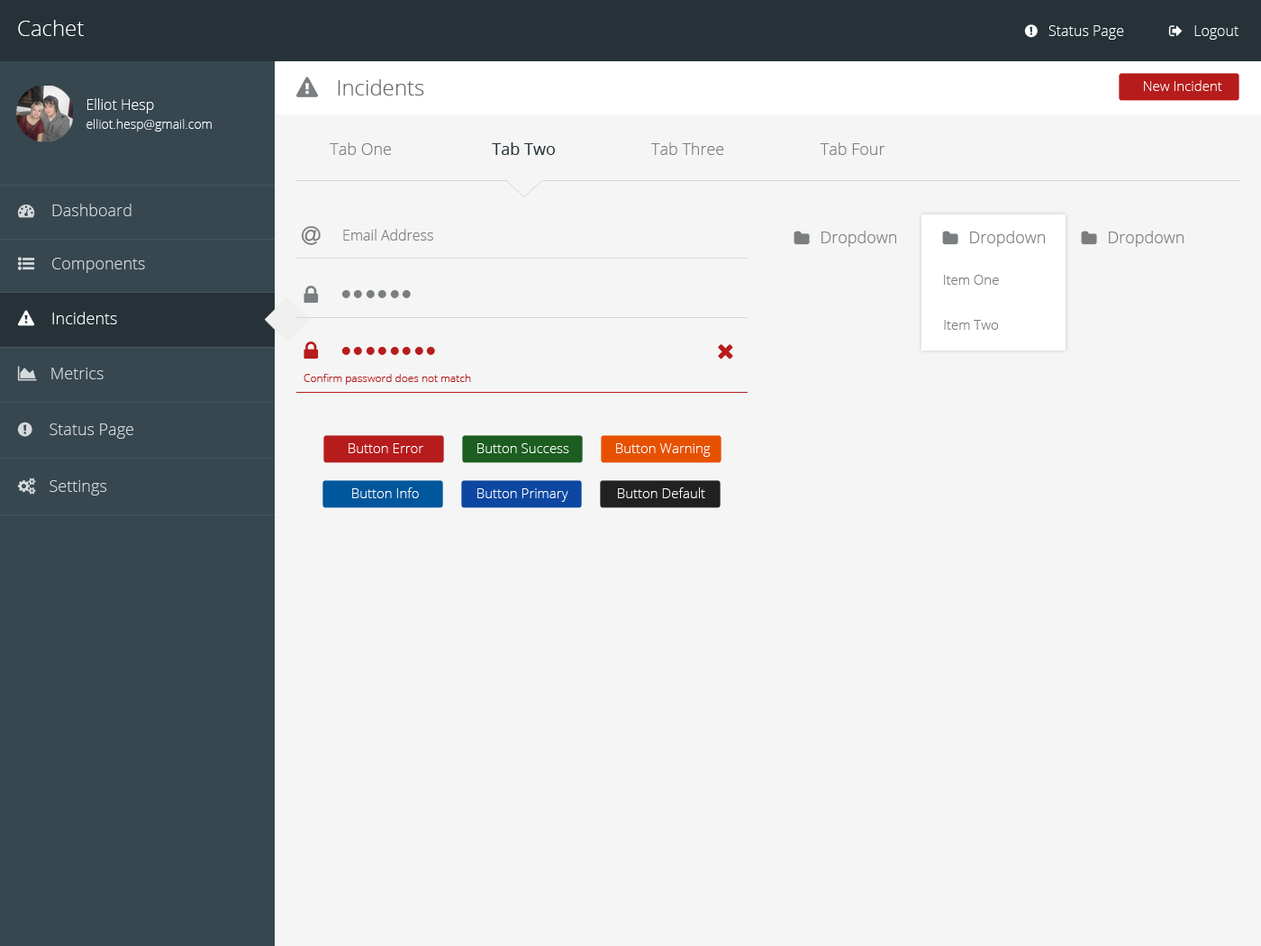
<style>
.page{position:relative;width:1261px;height:946px;background:#f5f5f5}
.page>*{position:absolute;margin:0}
.t1{font:21.6px "OpenSans-Light";color:#ffffff}
.t2{font:13.5px "OpenSans-Light";color:#ffffff}
.t3{font:12.6px/19.1px "OpenSans-Light";color:#ffffff}
.t4{font:14.4px/19.1px "OpenSans-Light";color:#ffffff}
.t5{font:16.2px "OpenSans-Light";color:#7b7e80}
.t6{font:16.2px "OpenSans";color:#263238}
.t7{font:14.4px "OpenSans-Light";color:#7b7e80}
.t8{font:13.5px "OpenSans-Light";color:#7b7e80}
.t9{font:10.8px "OpenSans-Light";color:#b71c1c}
</style>
<div class="page">
<p class="t1" style="left:18px;top:20px;width:66px;height:16px">Cachet</p>
<p class="t2" style="left:1144px;top:80px;width:78px;height:11px">New Incident</p>
<p class="t3" style="left:86px;top:98px;width:126px;height:33px"><span class="t4">Elliot Hesp<br></span>elliot.hesp@gmail.com</p>
<p class="t5" style="left:330px;top:142px;width:61px;height:13px">Tab One</p>
<p class="t6" style="left:492px;top:142px;width:63px;height:13px">Tab Two</p>
<p class="t5" style="left:651px;top:142px;width:73px;height:13px">Tab Three</p>
<p class="t5" style="left:820px;top:142px;width:65px;height:13px">Tab Four</p>
<p class="t7" style="left:343px;top:229px;width:90px;height:11px">Email Address</p>
<p class="t8" style="left:944px;top:275px;width:55px;height:10px">Item One</p>
<p class="t8" style="left:944px;top:320px;width:54px;height:10px">Item Two</p>
<p class="t9" style="left:304px;top:374px;width:167px;height:11px">Confirm password does not match</p>
<p class="t2" style="left:349px;top:443px;width:74px;height:10px">Button Error</p>
<p class="t2" style="left:477px;top:443px;width:92px;height:10px">Button Success</p>
<p class="t2" style="left:616px;top:443px;width:95px;height:14px">Button Warning</p>
<p class="t2" style="left:352px;top:487px;width:67px;height:11px">Button Info</p>
<p class="t2" style="left:477px;top:488px;width:91px;height:14px">Button Primary</p>
<p class="t2" style="left:618px;top:487px;width:87px;height:11px">Button Default</p>
</div>
